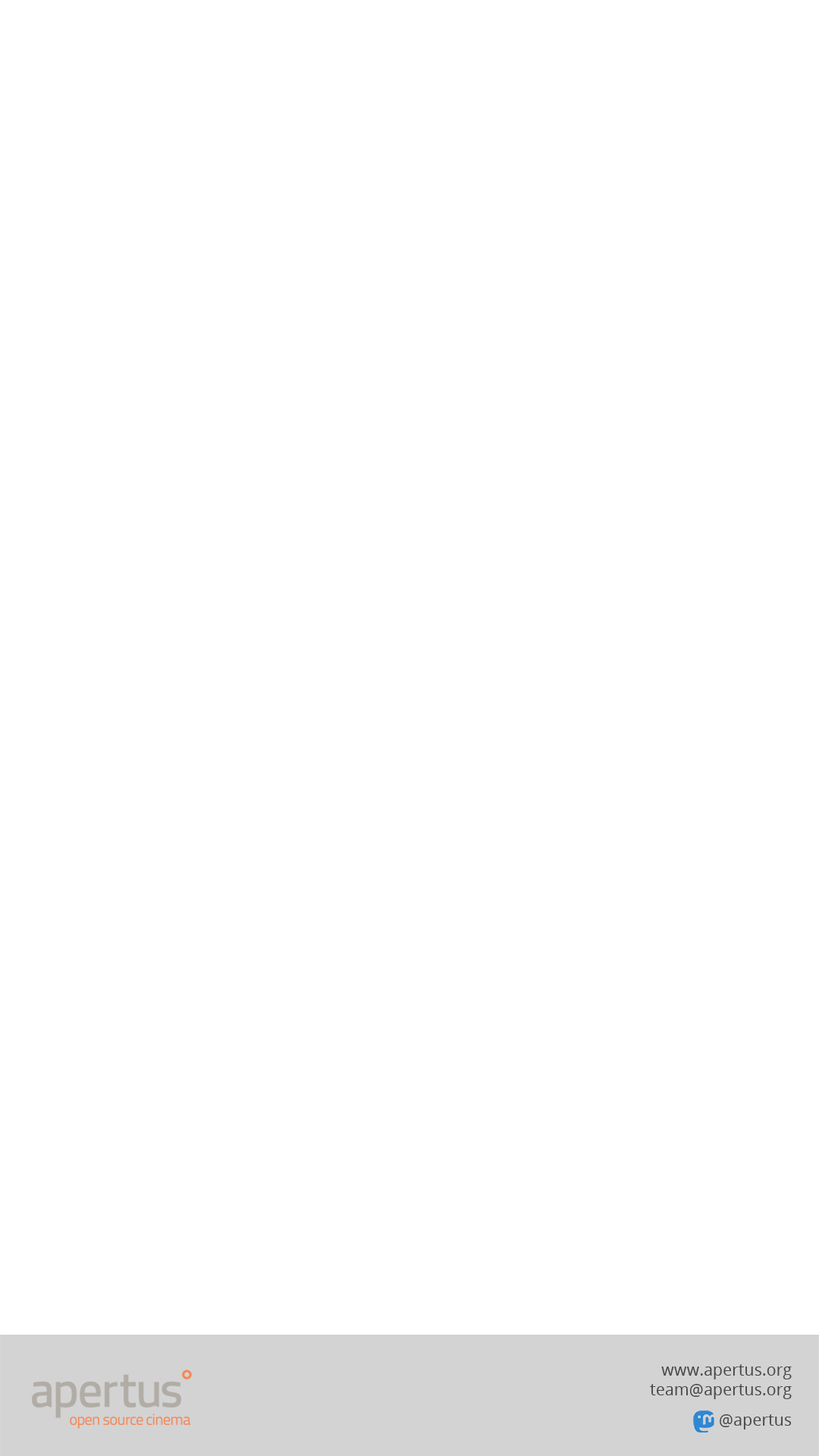
<style>
.page{position:relative;width:819px;height:1456px;background:#ffffff}
.page>*{position:absolute;margin:0}
.t1{font:16.3px "OpenSans";color:#474747}
</style>
<div class="page">
<p class="t1" style="left:650px;top:1364px;width:142px;height:65px;text-align:right">www.apertus.org<br>team@apertus.org<br><br>@apertus</p>
</div>
